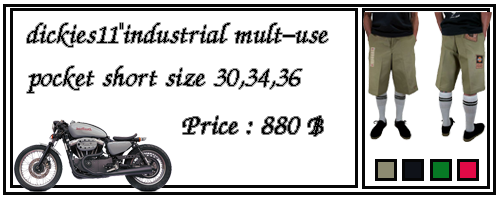
<style>
.page{position:relative;width:500px;height:200px;background:#ffffff}
.page>*{position:absolute;margin:0}
.t1{font:36px "DSUMonTaNa";color:#050505}
</style>
<div class="page">
<p class="t1" style="left:27px;top:23px;width:301px;height:70px">dickies11"industrial mult-use <br>pocket short size 30,34,36</p>
<p class="t1" style="left:183px;top:116px;width:140px;height:20px">Price : 880 ฿</p>
</div>
